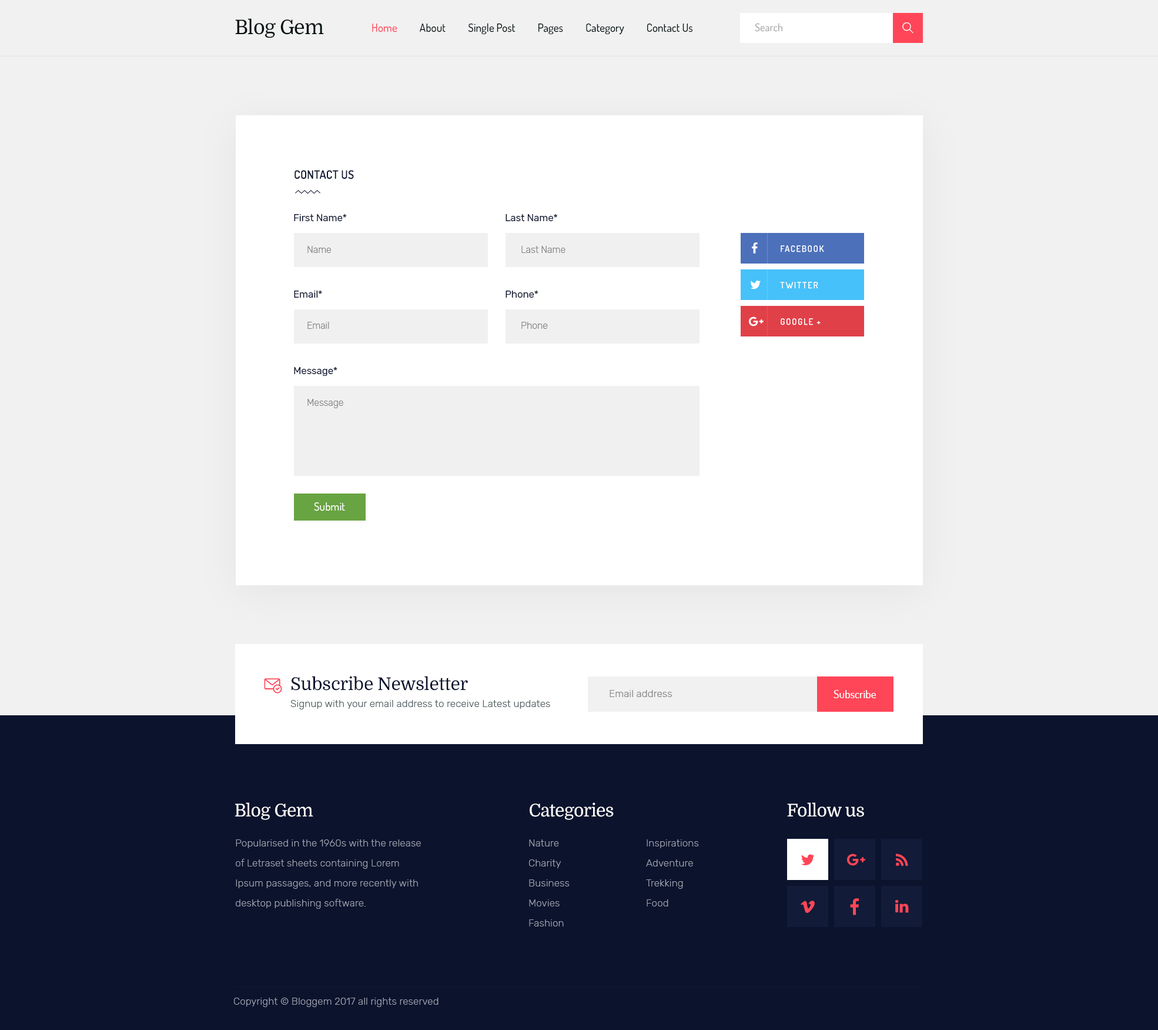
<style>
.page{position:relative;width:1158px;height:1030px;background:#f1f1f1}
.page>*{position:absolute;margin:0}
.t1{font:20px "Domine-Regular";letter-spacing:-0.025em;color:#051113}
.t2{font:11.2px "Dosis-Medium";color:#051113}
.t3{font:11.2px "Dosis-Medium";color:#ff4658}
.t4{font:10.6px "Dosis-Medium";color:#a7a7a7}
.t5{font:11.8px "Dosis-SemiBold";letter-spacing:0.005em;color:#0b132d;text-transform:uppercase}
.t6{font:10px "Rubik-Regular";letter-spacing:-0.01em;color:#0b132d}
.t7{font:9.4px "Rubik-Light";letter-spacing:-0.01em;color:#838383}
.t8{font:8.8px "Dosis-SemiBold";letter-spacing:0.1em;color:#ffffff;text-transform:uppercase}
.t9{font:11.2px "Dosis-Medium";color:#ffffff}
.t10{font:17.6px "Domine-Regular";letter-spacing:-0.01em;color:#0b132d}
.t11{font:10px "Rubik-Light";letter-spacing:0.005em;color:#858585}
.t12{font:10px "Rubik-Light";letter-spacing:0.005em;color:#586466}
.t13{font:17.6px "Domine-Regular";letter-spacing:-0.025em;color:#ffffff}
.t14{font:10px/20px "Rubik-Light";letter-spacing:0.005em;color:#a0a3ad}
.t15{font:10px "Rubik-Light";letter-spacing:0.005em;color:#a0a3ad}
</style>
<div class="page">
<p class="t1" style="left:235px;top:18px;width:89px;height:20px">Blog Gem</p>
<p class="t2" style="left:372px;top:23px;width:321px;height:12px"><span class="t3">Home</span>          About          Single Post          Pages          Category          Contact Us</p>
<p class="t4" style="left:755px;top:23px;width:28px;height:9px">Search</p>
<p class="t5" style="left:295px;top:170px;width:59px;height:9px">Contact Us</p>
<p class="t6" style="left:294px;top:214px;width:53px;height:7px">First Name*</p>
<p class="t6" style="left:506px;top:214px;width:51px;height:7px">Last Name*</p>
<p class="t7" style="left:307px;top:246px;width:24px;height:7px">Name</p>
<p class="t7" style="left:522px;top:246px;width:44px;height:7px">Last Name</p>
<p class="t8" style="left:781px;top:245px;width:43px;height:7px">Facebook</p>
<p class="t8" style="left:780px;top:282px;width:38px;height:7px">twitter</p>
<p class="t6" style="left:294px;top:290px;width:28px;height:8px">Email*</p>
<p class="t6" style="left:506px;top:290px;width:33px;height:8px">Phone*</p>
<p class="t7" style="left:307px;top:322px;width:22px;height:7px">Email</p>
<p class="t7" style="left:522px;top:322px;width:26px;height:7px">Phone</p>
<p class="t8" style="left:781px;top:318px;width:40px;height:7px">Google +</p>
<p class="t6" style="left:294px;top:367px;width:43px;height:9px">Message*</p>
<p class="t7" style="left:307px;top:399px;width:36px;height:9px">Message</p>
<p class="t9" style="left:314px;top:502px;width:31px;height:9px">Submit</p>
<p class="t10" style="left:292px;top:676px;width:176px;height:14px">Subscribe Newsletter</p>
<p class="t11" style="left:610px;top:690px;width:62px;height:7px">Email address</p>
<p class="t9" style="left:834px;top:690px;width:43px;height:8px">Subscribe</p>
<p class="t12" style="left:290px;top:700px;width:260px;height:9px">Signup with your email address to receive Latest updates</p>
<p class="t13" style="left:235px;top:802px;width:78px;height:18px">Blog Gem</p>
<p class="t13" style="left:530px;top:802px;width:84px;height:18px">Categories</p>
<p class="t13" style="left:787px;top:802px;width:77px;height:15px">Follow us</p>
<p class="t14" style="left:236px;top:839px;width:185px;height:69px">Popularised in the 1960s with the release of Letraset sheets containing Lorem Ipsum passages, and more recently with desktop publishing software.</p>
<p class="t14" style="left:529px;top:839px;width:41px;height:87px">Nature<br>Charity<br>Business<br>Movies<br>Fashion</p>
<p class="t14" style="left:646px;top:839px;width:53px;height:67px">Inspirations<br>Adventure<br>Trekking<br>Food</p>
<p class="t15" style="left:234px;top:997px;width:205px;height:10px">Copyright © Bloggem 2017 all rights reserved</p>
</div>
